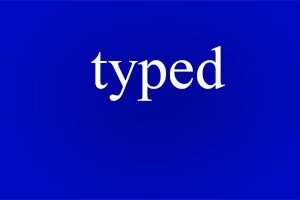
<style>
.page{position:relative;width:300px;height:200px}
.page>*{position:absolute;margin:0}
.t1{font:60px "TimesNewRomanPSMT";color:#ffffff}
</style>
<div class="page">
<p class="t1" style="left:91px;top:46px;width:134px;height:55px">typed</p>
</div>
